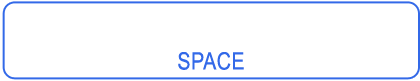
<style>
.page{position:relative;width:420px;height:81px;background:#ffffff}
.page>*{position:absolute;margin:0}
.t1{font:24px "ArialNarrow";letter-spacing:0.02em;color:#3369e8}
</style>
<div class="page">
<p class="t1" style="left:178px;top:52px;width:66px;height:18px">SPACE</p>
</div>
